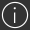
<style>
.page{position:relative;width:30px;height:30px;background:#333333}
.page>*{position:absolute;margin:0}
.t1{font:22.6px "Avenir-Light";color:#ffffff}
</style>
<div class="page">
<p class="t1" style="left:13px;top:7px;width:3px;height:16px">i</p>
</div>
